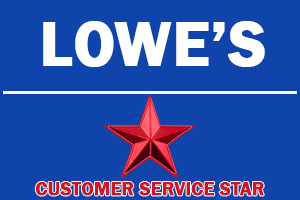
<style>
.page{position:relative;width:300px;height:200px;background:#0f45aa}
.page>*{position:absolute;margin:0}
.t1{font:64px "FranklinGothic-Demi";color:#ffffff;font-weight:bold}
.t2{font:18.7px "FranklinGothic-Demi";color:#cb1529;font-weight:bold}
</style>
<div class="page">
<p class="t1" style="left:43px;top:21px;width:222px;height:46px">LOWE’S</p>
<p class="t2" style="left:35px;top:182px;width:229px;height:14px">CUSTOMER SERVICE STAR</p>
</div>
